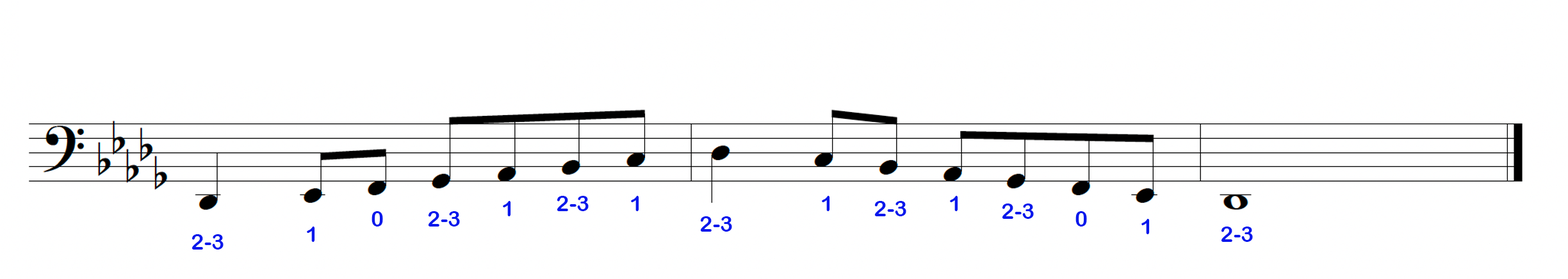
<style>
.page{position:relative;width:1568px;height:279px;background:#ffffff}
.page>*{position:absolute;margin:0}
.t1{font:21.8px "ArialRoundedMTBold";color:#0417ec}
</style>
<div class="page">
<p class="t1" style="left:557px;top:196px;width:32px;height:15px">2-3</p>
<p class="t1" style="left:631px;top:196px;width:8px;height:15px">1</p>
<p class="t1" style="left:822px;top:196px;width:8px;height:15px">1</p>
<p class="t1" style="left:950px;top:196px;width:8px;height:15px">1</p>
<p class="t1" style="left:503px;top:201px;width:8px;height:15px">1</p>
<p class="t1" style="left:874px;top:201px;width:32px;height:15px">2-3</p>
<p class="t1" style="left:1002px;top:204px;width:32px;height:15px">2-3</p>
<p class="t1" style="left:372px;top:211px;width:11px;height:16px">0</p>
<p class="t1" style="left:428px;top:211px;width:32px;height:16px">2-3</p>
<p class="t1" style="left:700px;top:216px;width:32px;height:16px">2-3</p>
<p class="t1" style="left:1075px;top:211px;width:12px;height:16px">0</p>
<p class="t1" style="left:1141px;top:219px;width:9px;height:15px">1</p>
<p class="t1" style="left:307px;top:227px;width:8px;height:15px">1</p>
<p class="t1" style="left:1221px;top:227px;width:32px;height:15px">2-3</p>
<p class="t1" style="left:192px;top:234px;width:32px;height:16px">2-3</p>
</div>
